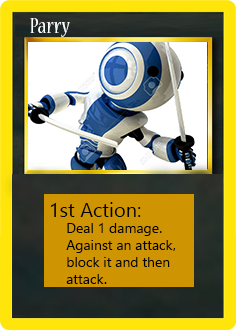
<style>
.page{position:relative;width:236px;height:330px}
.page>*{position:absolute;margin:0}
.t1{font:24px "NuevaStd-Cond";color:#ffffff}
.t2{font:20px "LeelawadeeUI";color:#000000}
.t3{font:14px "LeelawadeeUI";color:#000000}
</style>
<div class="page">
<p class="t1" style="left:30px;top:18px;width:40px;height:19px">Parry</p>
<p class="t2" style="left:50px;top:202px;width:91px;height:15px">1st Action:</p>
<p class="t3" style="left:66px;top:223px;width:110px;height:61px">Deal 1 damage. <br>Against an attack, <br>block it and then <br>attack.</p>
</div>
